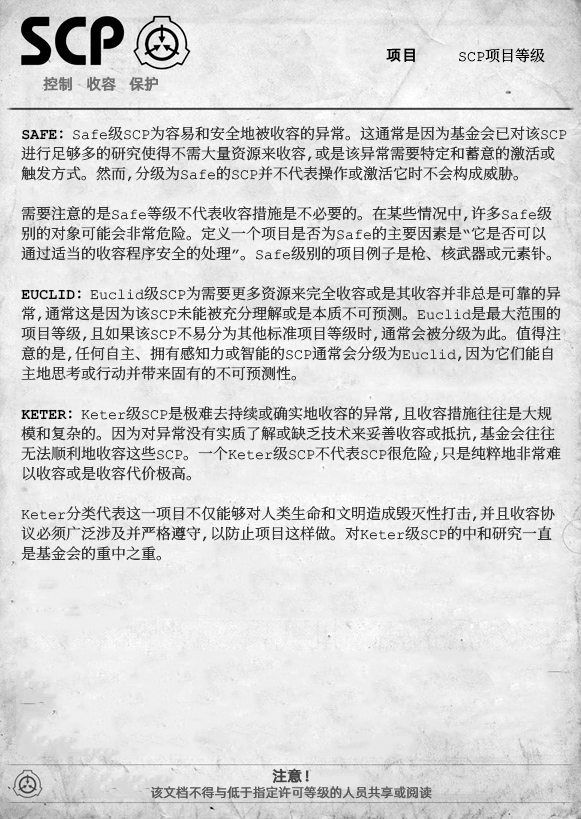
<style>
.page{position:relative;width:581px;height:819px}
.page>*{position:absolute;margin:0}
.t1{font:15px "ContainmentBreach-Regular";color:#000000}
.t2{font:15px "AlibabaPuHuiTiR";color:#000000;font-weight:bold}
.t3{font:15px "AlibabaPuHuiTiR";color:#707070;font-weight:bold}
.t4{font:15px/20px "ContainmentBreach-Regular";color:#353535}
.t5{font:15px/20px "ContainmentBreach-Bold";color:#000000}
.t6{font:15px "AlibabaPuHuiTiR";color:#414141;font-weight:bold}
.t7{font:13px "AlibabaPuHuiTiR";color:#575757}
</style>
<div class="page">
<p class="t1" style="left:386px;top:48px;width:159px;height:15px"><span class="t2">项目  </span>SCP项目等级</p>
<p class="t3" style="left:43px;top:76px;width:115px;height:15px">控制   收容   保护</p>
<p class="t4" style="left:21px;top:126px;width:546px;height:435px"><span class="t5">SAFE：</span>Safe级SCP为容易和安全地被收容的异常。这通常是因为基金会已对该SCP<br>进行足够多的研究使得不需大量资源来收容，或是该异常需要特定和蓄意的激活或<br>触发方式。然而，分级为Safe的SCP并不代表操作或激活它时不会构成威胁。<br><br>需要注意的是Safe等级不代表收容措施是不必要的。在某些情况中，许多Safe级<br>别的对象可能会非常危险。定义一个项目是否为Safe的主要因素是“它是否可以<br>通过适当的收容程序安全的处理”。Safe级别的项目例子是枪、核武器或元素钋。<br><br><span class="t5">EUCLID：</span>Euclid级SCP为需要更多资源来完全收容或是其收容并非总是可靠的异<br>常，通常这是因为该SCP未能被充分理解或是本质不可预测。Euclid是最大范围的<br>项目等级，且如果该SCP不易分为其他标准项目等级时，通常会被分级为此。值得注<br>意的是，任何自主、拥有感知力或智能的SCP通常会分级为Euclid，因为它们能自<br>主地思考或行动并带来固有的不可预测性。<br><br><span class="t5">KETER：</span>Keter级SCP是极难去持续或确实地收容的异常，且收容措施往往是大规<br>模和复杂的。因为对异常没有实质了解或缺乏技术来妥善收容或抵抗，基金会往往<br>无法顺利地收容这些SCP。一个Keter级SCP不代表SCP很危险，只是纯粹地非常难<br>以收容或是收容代价极高。<br><br>Keter分类代表这一项目不仅能够对人类生命和文明造成毁灭性打击，并且收容协<br>议必须广泛涉及并严格遵守，以防止项目这样做。对Keter级SCP的中和研究一直<br>是基金会的重中之重。</p>
<p class="t6" style="left:272px;top:768px;width:37px;height:15px">注意！</p>
<p class="t7" style="left:151px;top:786px;width:281px;height:13px">该文档不得与低于指定许可等级的人员共享或阅读</p>
</div>
